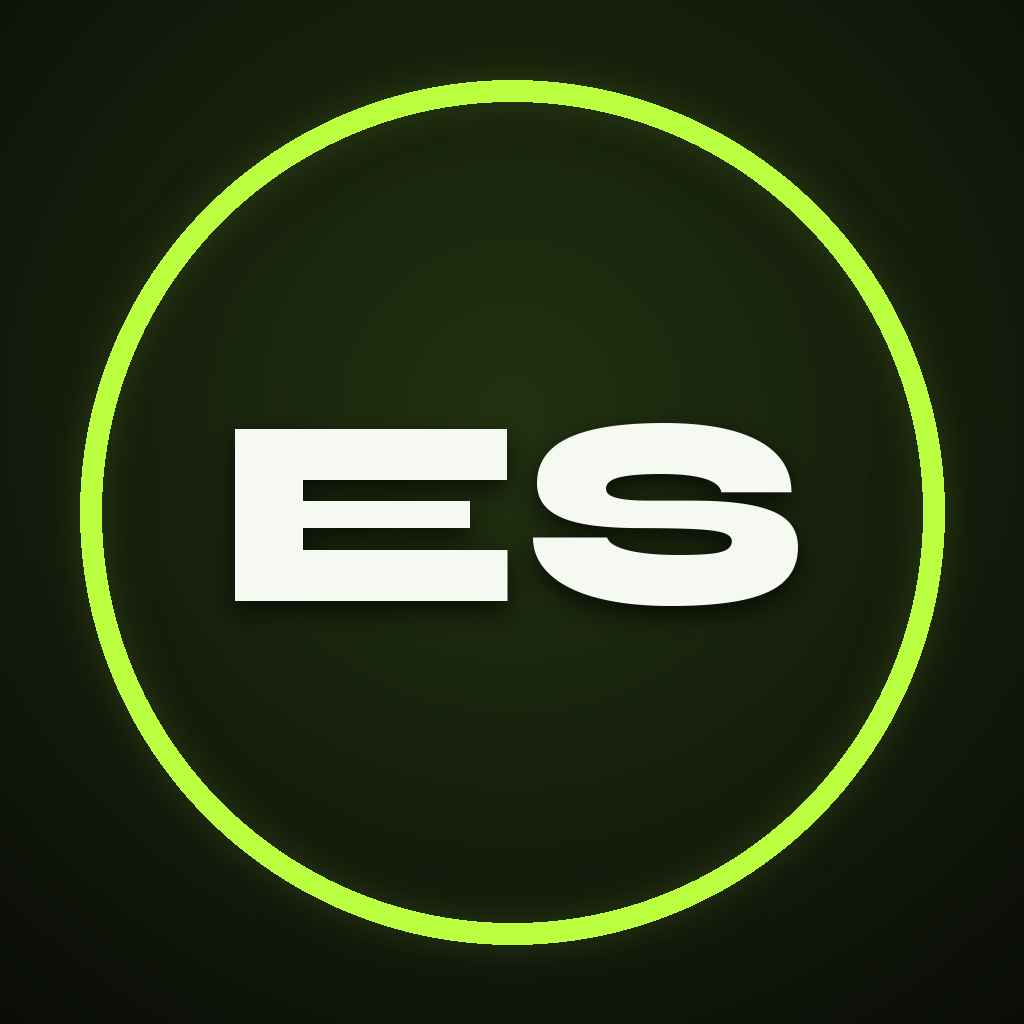
<style>
.page{position:relative;width:1024px;height:1024px}
.page>*{position:absolute;margin:0}
.t1{font:270px "Syne-ExtraBold";color:#f6f8f2}
</style>
<div class="page">
<p class="t1" style="left:235px;top:423px;width:563px;height:183px">ES</p>
</div>
